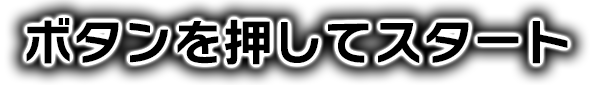
<style>
.page{position:relative;width:600px;height:85px;background:#ffffff}
.page>*{position:absolute;margin:0}
.t1{font:50px "NitalagoRuika-06";color:#000000}
</style>
<div class="page">
<p class="t1" style="left:26px;top:18px;width:542px;height:47px">ボタンを押してスタート</p>
</div>
